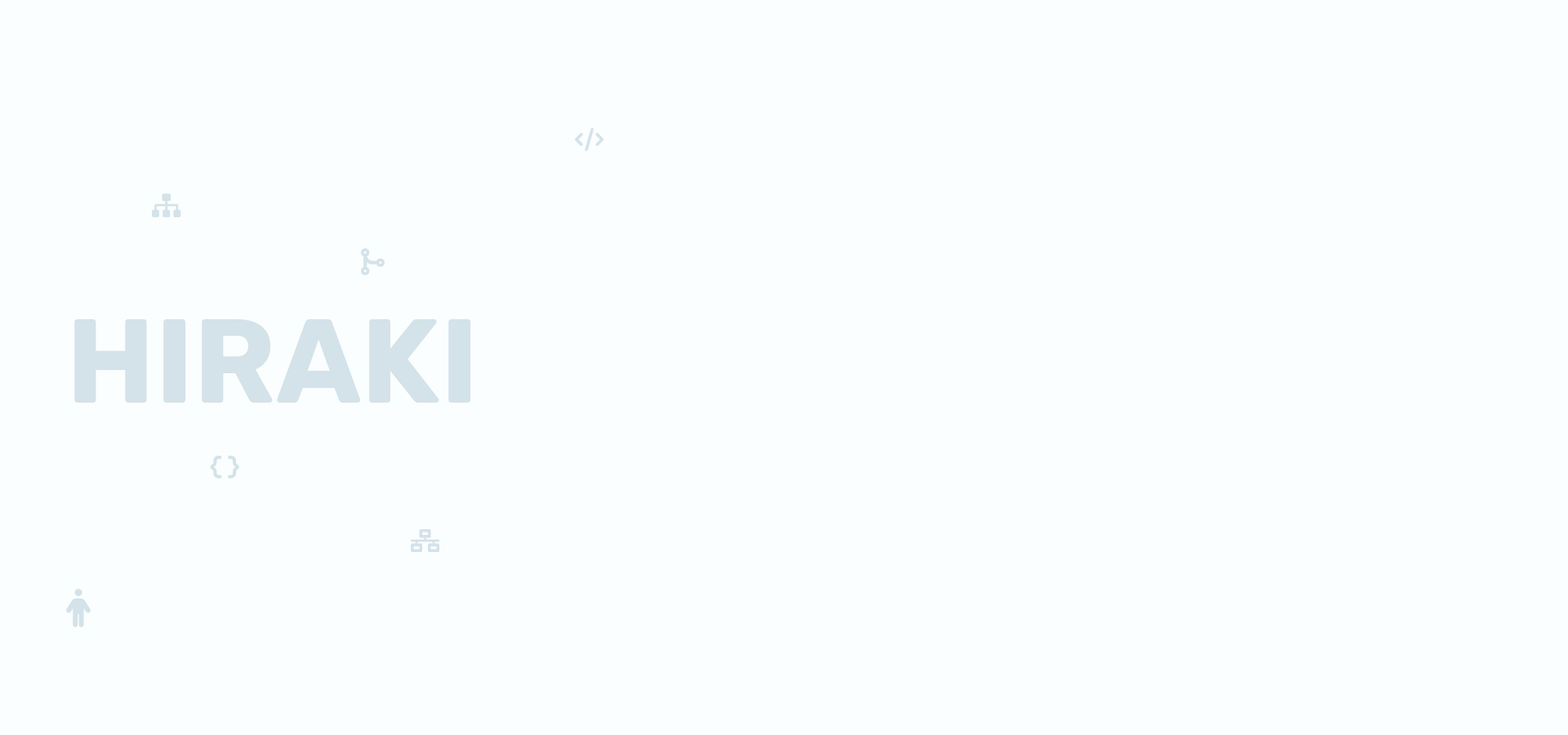
<style>
.page{position:relative;width:1568px;height:735px;background:#fbfefe}
.page>*{position:absolute;margin:0}
.t1{font:119.1px "RubikRoman-Bold";color:#d4e2e9}
</style>
<div class="page">
<p class="t1" style="left:74px;top:318px;width:397px;height:85px">HIRAKI</p>
</div>
